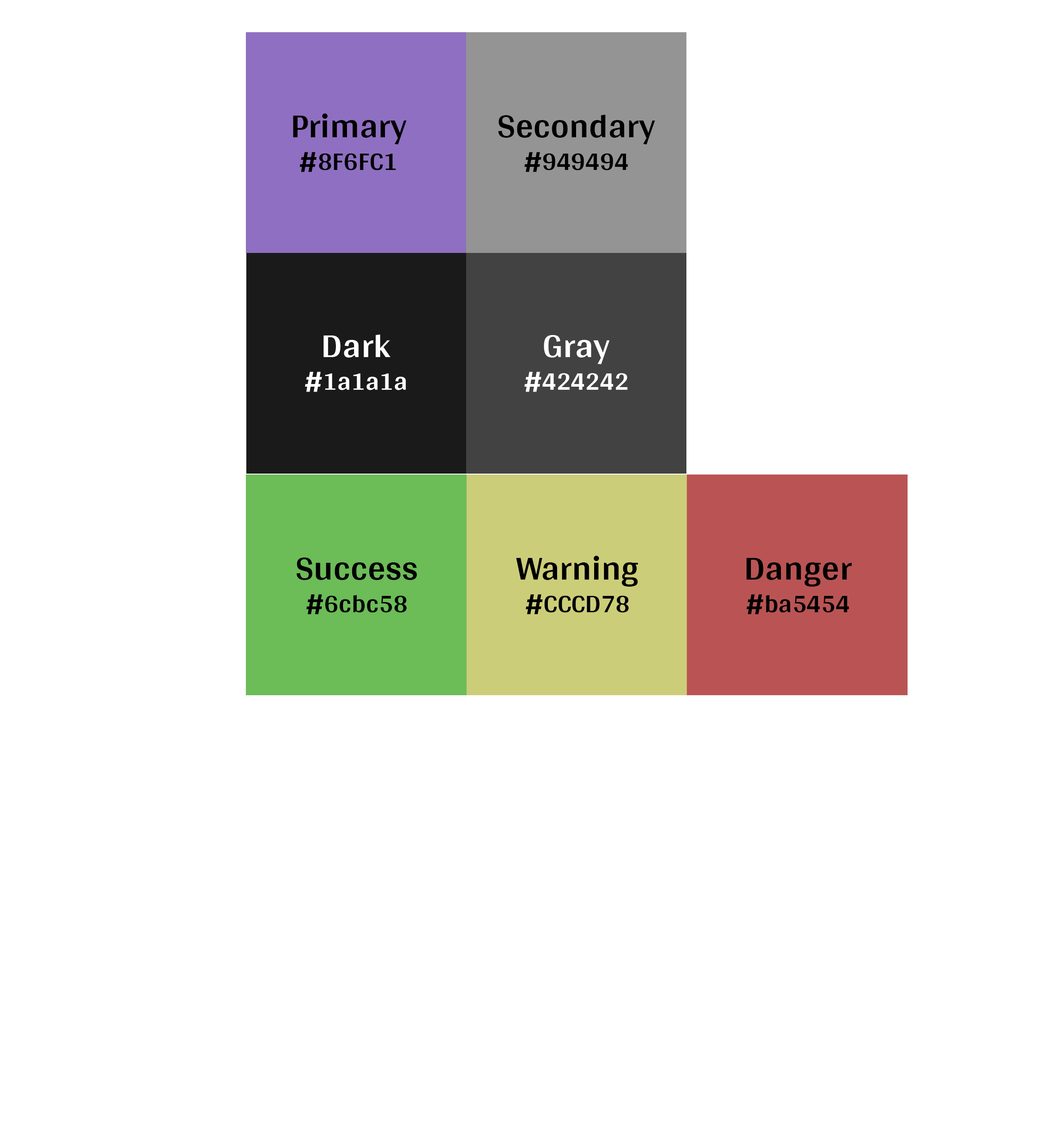
<style>
.page{position:relative;width:1055px;height:1130px;background:#ffffff}
.page>*{position:absolute;margin:0}
.t1{font:35.3px "Arya-Bold";color:#000000}
.t2{font:26.5px "Arya-Bold";color:#000000}
.t3{font:35.3px "Arya-Bold";color:#ffffff}
.t4{font:26.5px "Arya-Bold";color:#ffffff}
</style>
<div class="page">
<p class="t1" style="left:293px;top:113px;width:114px;height:31px">Primary</p>
<p class="t1" style="left:498px;top:114px;width:157px;height:30px">Secondary</p>
<p class="t2" style="left:300px;top:152px;width:96px;height:20px">#8F6FC1</p>
<p class="t2" style="left:524px;top:152px;width:104px;height:20px">#949494</p>
<p class="t3" style="left:324px;top:335px;width:67px;height:23px">Dark</p>
<p class="t3" style="left:544px;top:335px;width:66px;height:29px">Gray</p>
<p class="t4" style="left:305px;top:372px;width:101px;height:20px">#1a1a1a</p>
<p class="t4" style="left:524px;top:372px;width:104px;height:20px">#424242</p>
<p class="t1" style="left:296px;top:558px;width:121px;height:22px">Success</p>
<p class="t1" style="left:516px;top:556px;width:122px;height:31px">Warning</p>
<p class="t1" style="left:747px;top:558px;width:105px;height:29px">Danger</p>
<p class="t2" style="left:306px;top:594px;width:101px;height:21px">#6cbc58</p>
<p class="t2" style="left:526px;top:594px;width:103px;height:21px">#CCCD78</p>
<p class="t2" style="left:747px;top:594px;width:102px;height:21px">#ba5454</p>
</div>
